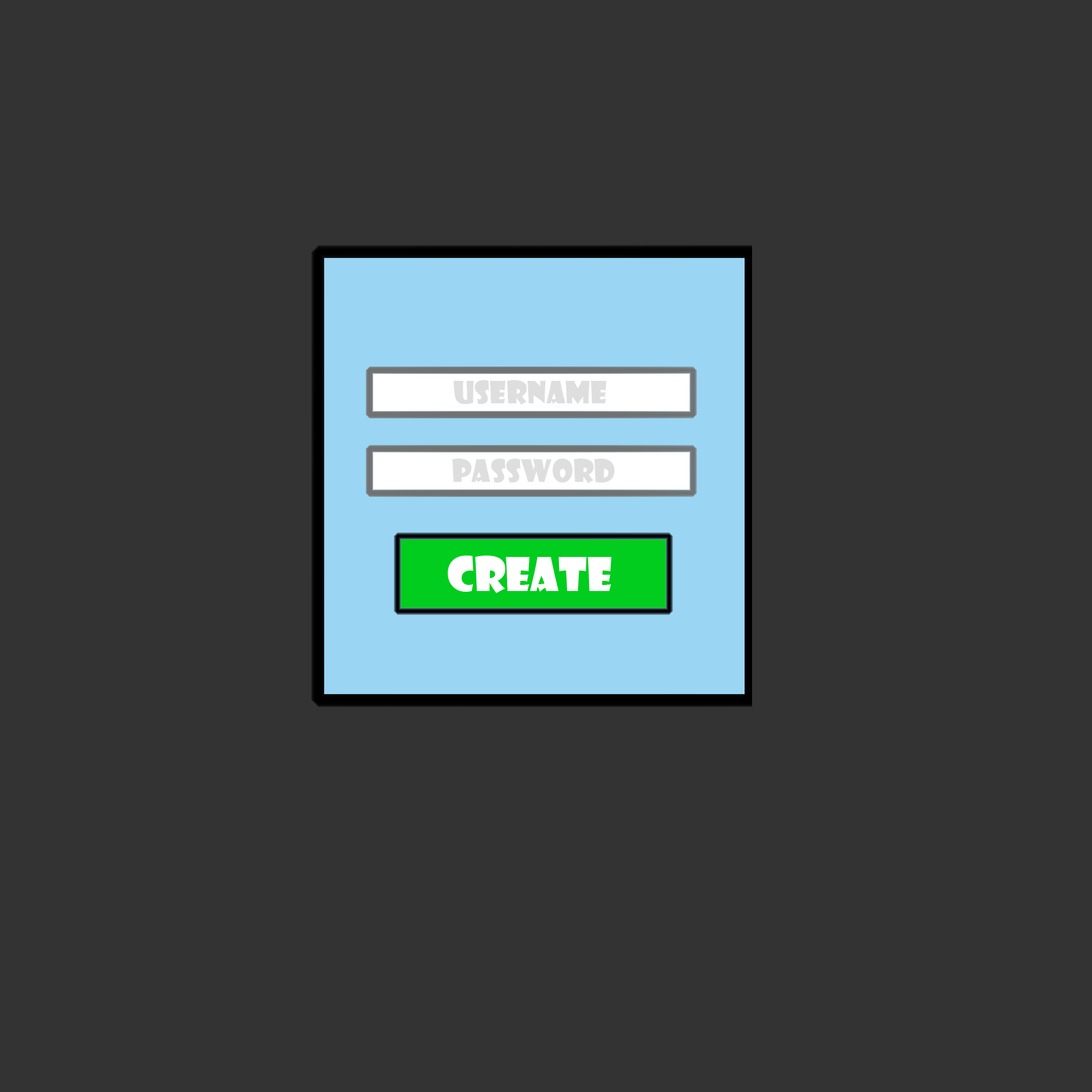
<style>
.page{position:relative;width:1092px;height:1092px;background:#333333}
.page>*{position:absolute;margin:0}
.t1{font:30.3px "ShowcardGothic-Reg";color:#dedede}
.t2{font:45.5px "ShowcardGothic-Reg";color:#ffffff}
</style>
<div class="page">
<p class="t1" style="left:453px;top:380px;width:154px;height:25px">username</p>
<p class="t1" style="left:452px;top:459px;width:163px;height:24px">PassWord</p>
<p class="t2" style="left:448px;top:556px;width:164px;height:37px">Create</p>
</div>
